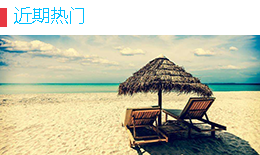
<style>
.page{position:relative;width:260px;height:155px;background:#ffffff}
.page>*{position:absolute;margin:0}
.t1{font:18px "MicrosoftYaHei";color:#00bfff}
</style>
<div class="page">
<p class="t1" style="left:14px;top:7px;width:70px;height:17px">近期热门</p>
</div>
